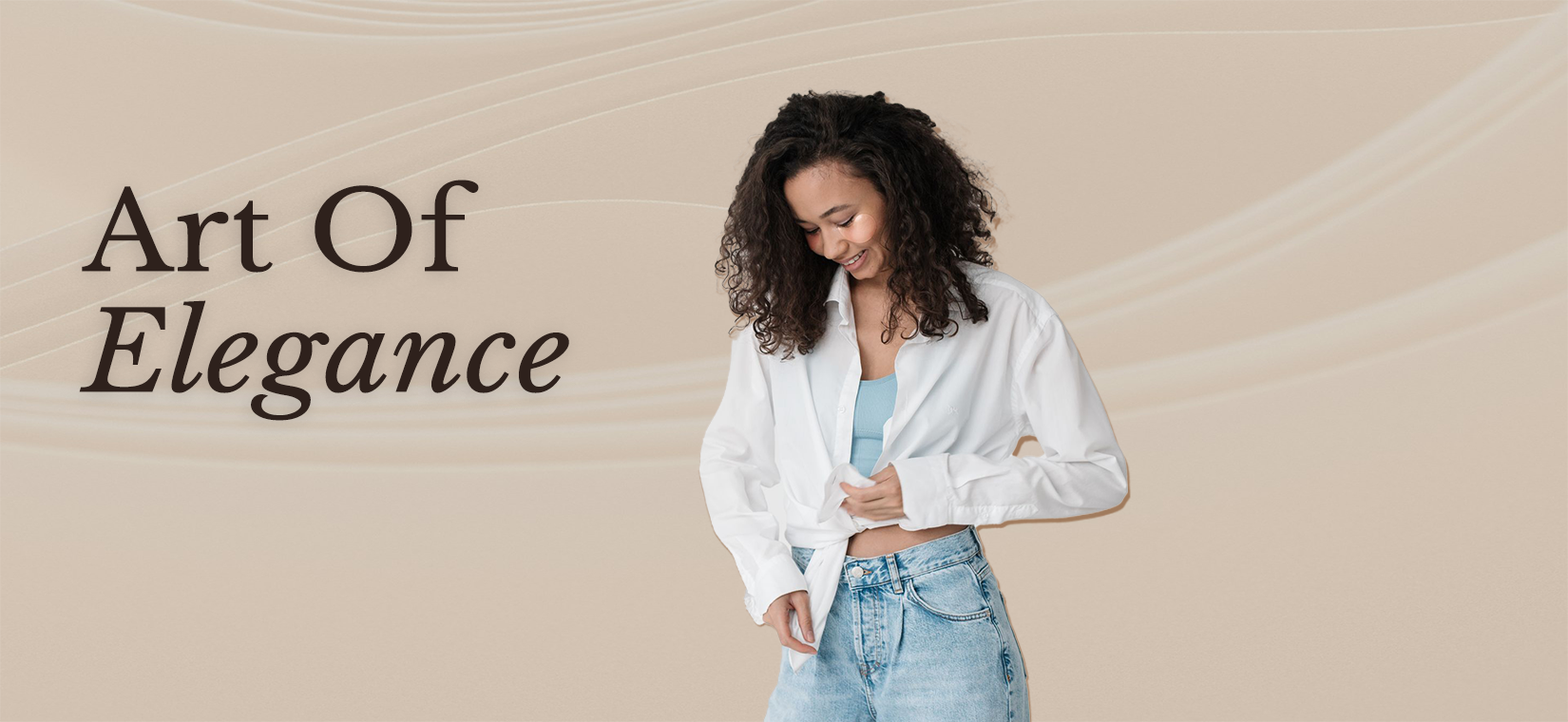
<style>
.page{position:relative;width:1568px;height:722px}
.page>*{position:absolute;margin:0}
.t1{font:109.7px "LibreBaskerville-Regular";letter-spacing:0.005em;color:#2e211c;scale:1.06 1}
.t2{font:109.7px "LibreBaskerville-Italic";letter-spacing:0.005em;color:#2e211c;scale:1.06 1}
</style>
<div class="page">
<p class="t1" style="left:82px;top:180px;width:397px;height:93px">Art Of</p>
<p class="t2" style="left:79px;top:300px;width:490px;height:121px">Elegance</p>
</div>
